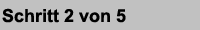
<style>
.page{position:relative;width:200px;height:30px;background:#c1c1c1}
.page>*{position:absolute;margin:0}
.t1{font:18px "Arial-BoldMT";color:#000000}
</style>
<div class="page">
<p class="t1" style="left:2px;top:8px;width:124px;height:15px">Schritt 2 von 5</p>
</div>
